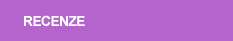
<style>
.page{position:relative;width:233px;height:41px;background:#b564ce}
.page>*{position:absolute;margin:0}
.t1{font:14px "Arial-BoldMT";letter-spacing:-0.05em;color:#ffffff;text-transform:uppercase}
</style>
<div class="page">
<p class="t1" style="left:24px;top:15px;width:61px;height:11px">recenze</p>
</div>
